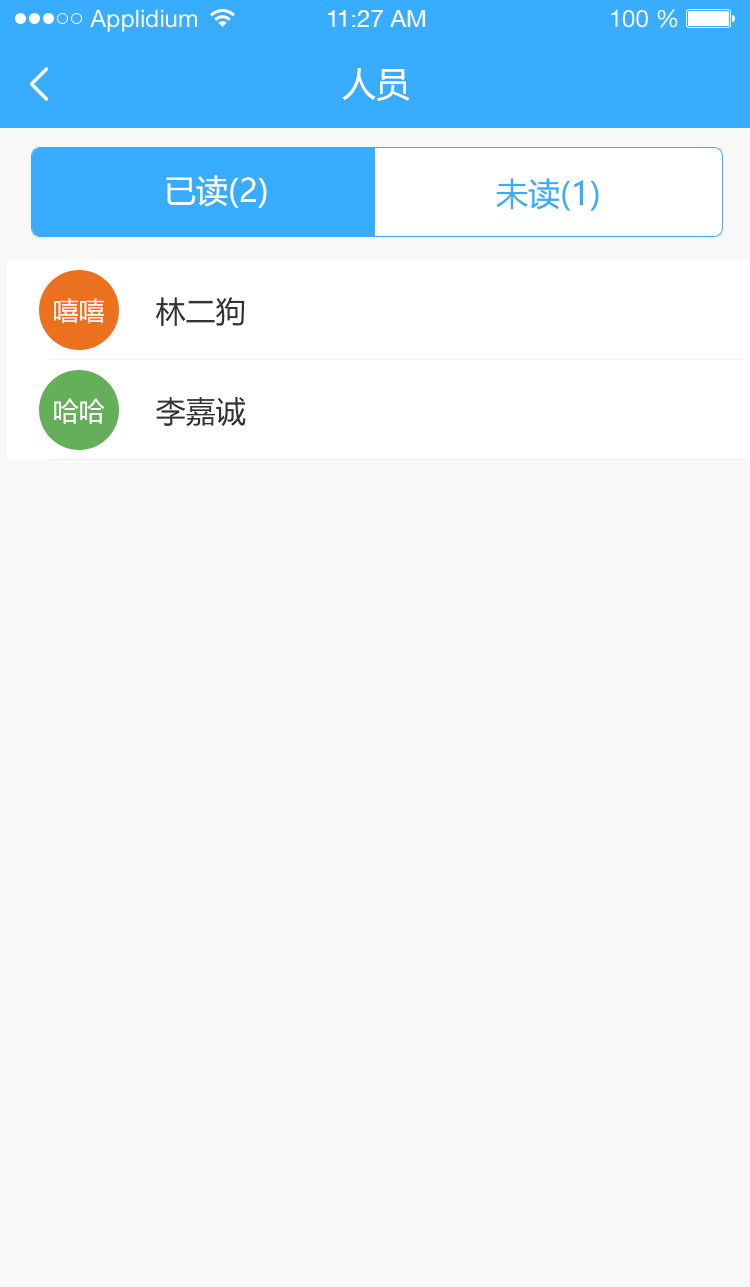
<style>
.page{position:relative;width:750px;height:1287px;background:#f8f8f8}
.page>*{position:absolute;margin:0}
.t1{font:24px "HelveticaNeueLTStd-Roman";color:#ffffff}
.t2{font:24px "HelveticaNeueCE-Roman";color:#ffffff}
.t3{font:34px "MicrosoftYaHei";color:#ffffff}
.t4{font:32px "MicrosoftYaHei";color:#ffffff}
.t5{font:32px "MicrosoftYaHei";color:#38adff}
.t6{font:26px "MicrosoftYaHei";color:#fffefe}
.t7{font:30px "MicrosoftYaHei";color:#333333}
</style>
<div class="page">
<p class="t1" style="left:90px;top:9px;width:107px;height:23px">Applidium</p>
<p class="t2" style="left:328px;top:10px;width:98px;height:17px">11:27 AM</p>
<p class="t1" style="left:611px;top:9px;width:67px;height:19px">100 %</p>
<p class="t3" style="left:342px;top:68px;width:68px;height:33px">人员</p>
<p class="t4" style="left:166px;top:175px;width:101px;height:33px">已读(2)</p>
<p class="t5" style="left:496px;top:178px;width:103px;height:33px">未读(1)</p>
<p class="t6" style="left:54px;top:298px;width:50px;height:26px">嘻嘻</p>
<p class="t7" style="left:156px;top:297px;width:89px;height:29px">林二狗</p>
<p class="t6" style="left:54px;top:398px;width:51px;height:26px">哈哈</p>
<p class="t7" style="left:156px;top:397px;width:90px;height:30px">李嘉诚</p>
</div>
